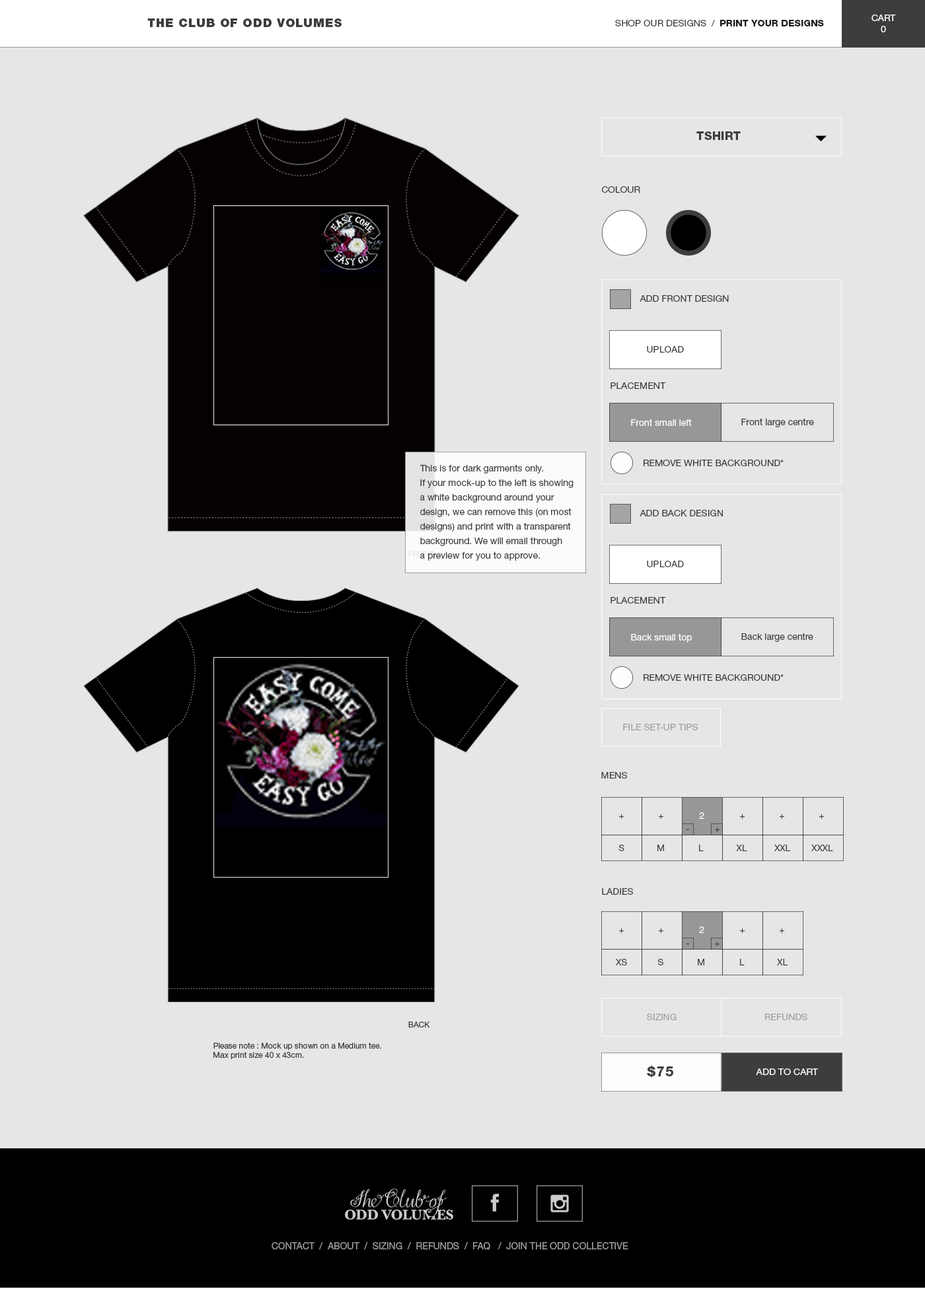
<style>
.page{position:relative;width:925px;height:1289px;background:#e6e6e6}
.page>*{position:absolute;margin:0}
.t1{font:9.2px "HelveticaNeueLTStd-Roman";color:#ffffff}
.t2{font:11.9px "HelveticaNeueLTStd-Blk";letter-spacing:0.05em;color:#3d3d3d}
.t3{font:9.2px "HelveticaNeueLTStd-Roman";color:#3d3d3d}
.t4{font:9.2px "HelveticaNeueLTStd-Hv";color:#1b1b1b}
.t5{font:11.9px "HelveticaNeueLTStd-Hv";color:#3d3d3d}
.t6{font:9.2px "HelveticaNeueLTStd-Roman";color:#3e3e3e}
.t7{font:9.2px "HelveticaNeueLTStd-Roman";color:#fffcfc}
.t8{font:9.2px/14.5px "HelveticaNeueLTStd-Roman";color:#3e3e3e}
.t9{font:9.2px "HelveticaNeueLTStd-Roman";color:#a0a0a0}
.t10{font:9.1px "HelveticaNeueLTStd-Roman";color:#3e3e3e}
.t11{font:9.1px "HelveticaNeueLTStd-Roman";color:#ffffff}
.t12{font:9.1px "HelveticaNeueLTStd-Roman";color:#3d3d3d}
.t13{font:7.9px "HelveticaNeueLTStd-Roman";color:#3e3e3e}
.t14{font:13.2px "HelveticaNeueLTStd-Hv";letter-spacing:0.05em;color:#3d3d3d}
.t15{font:9.2px "HelveticaNeueLTStd-Roman";color:#faf9f9}
.t16{font:9.5px "HelveticaNeueLTStd-Roman";color:#9b9b9b}
</style>
<div class="page">
<p class="t1" style="left:871px;top:15px;width:25px;height:17px;text-align:center">CART<br>0</p>
<p class="t2" style="left:147px;top:18px;width:195px;height:9px">THE CLUB OF ODD VOLUMES</p>
<p class="t3" style="left:615px;top:20px;width:209px;height:6px">SHOP OUR DESIGNS  /  <span class="t4">PRINT YOUR DESIGNS</span></p>
<p class="t5" style="left:696px;top:131px;width:44px;height:9px">TSHIRT</p>
<p class="t6" style="left:602px;top:186px;width:38px;height:7px">COLOUR</p>
<p class="t6" style="left:639px;top:295px;width:90px;height:7px">ADD FRONT DESIGN</p>
<p class="t6" style="left:647px;top:346px;width:37px;height:7px">UPLOAD</p>
<p class="t6" style="left:610px;top:382px;width:56px;height:7px">PLACEMENT</p>
<p class="t7" style="left:631px;top:419px;width:61px;height:7px">Front small left</p>
<p class="t6" style="left:741px;top:418px;width:73px;height:9px">Front large centre</p>
<p class="t6" style="left:643px;top:460px;width:140px;height:6px">REMOVE WHITE BACKGROUND*</p>
<p class="t8" style="left:419px;top:464px;width:154px;height:97px">This is for dark garments only.<br>If your mock-up to the left is showing <br>a white background around your <br>design, we can remove this (on most <br>designs) and print with a transparent <br>background. We will email through <br>a preview for you to approve.</p>
<p class="t6" style="left:639px;top:510px;width:84px;height:7px">ADD BACK DESIGN</p>
<p class="t6" style="left:647px;top:561px;width:37px;height:6px">UPLOAD</p>
<p class="t6" style="left:610px;top:597px;width:56px;height:7px">PLACEMENT</p>
<p class="t7" style="left:631px;top:633px;width:61px;height:10px">Back small top</p>
<p class="t6" style="left:741px;top:633px;width:72px;height:9px">Back large centre</p>
<p class="t6" style="left:643px;top:674px;width:140px;height:7px">REMOVE WHITE BACKGROUND*</p>
<p class="t9" style="left:623px;top:724px;width:75px;height:7px">FILE SET-UP TIPS</p>
<p class="t6" style="left:601px;top:772px;width:26px;height:7px">MENS</p>
<p class="t10" style="left:619px;top:814px;width:5px;height:5px">+</p>
<p class="t10" style="left:658px;top:814px;width:5px;height:5px">+</p>
<p class="t11" style="left:699px;top:812px;width:5px;height:7px">2</p>
<p class="t10" style="left:740px;top:814px;width:5px;height:5px">+</p>
<p class="t10" style="left:779px;top:814px;width:5px;height:5px">+</p>
<p class="t10" style="left:818px;top:814px;width:6px;height:5px">+</p>
<p class="t10" style="left:686px;top:829px;width:3px;height:1px">-</p>
<p class="t10" style="left:715px;top:828px;width:5px;height:4px">+</p>
<p class="t10" style="left:618px;top:845px;width:6px;height:6px">S</p>
<p class="t10" style="left:657px;top:845px;width:7px;height:6px">M</p>
<p class="t12" style="left:699px;top:845px;width:4px;height:6px">L</p>
<p class="t10" style="left:736px;top:845px;width:11px;height:6px">XL</p>
<p class="t10" style="left:774px;top:845px;width:17px;height:6px">XXL</p>
<p class="t10" style="left:811px;top:845px;width:22px;height:6px">XXXL</p>
<p class="t6" style="left:602px;top:888px;width:31px;height:7px">LADIES</p>
<p class="t10" style="left:619px;top:929px;width:5px;height:4px">+</p>
<p class="t10" style="left:658px;top:929px;width:5px;height:4px">+</p>
<p class="t11" style="left:699px;top:927px;width:5px;height:6px">2</p>
<p class="t10" style="left:740px;top:929px;width:5px;height:4px">+</p>
<p class="t10" style="left:779px;top:929px;width:5px;height:4px">+</p>
<p class="t10" style="left:715px;top:942px;width:5px;height:5px">+</p>
<p class="t10" style="left:686px;top:943px;width:3px;height:2px">-</p>
<p class="t10" style="left:616px;top:959px;width:11px;height:7px">XS</p>
<p class="t10" style="left:658px;top:959px;width:5px;height:7px">S</p>
<p class="t12" style="left:698px;top:959px;width:6px;height:7px">M</p>
<p class="t10" style="left:740px;top:959px;width:4px;height:7px">L</p>
<p class="t10" style="left:777px;top:959px;width:11px;height:7px">XL</p>
<p class="t9" style="left:647px;top:1014px;width:29px;height:7px">SIZING</p>
<p class="t9" style="left:765px;top:1014px;width:42px;height:7px">REFUNDS</p>
<p class="t13" style="left:408px;top:1022px;width:22px;height:6px">BACK</p>
<p class="t13" style="left:213px;top:1043px;width:168px;height:17px">Please note : Mock up shown on a Medium tee. <br>Max print size 40 x 43cm.</p>
<p class="t14" style="left:647px;top:1065px;width:26px;height:13px">$75</p>
<p class="t15" style="left:756px;top:1069px;width:62px;height:6px">ADD TO CART</p>
<p class="t16" style="left:271px;top:1243px;width:357px;height:7px">CONTACT  /  ABOUT  /  SIZING  /  REFUNDS  /  FAQ   /  JOIN THE ODD COLLECTIVE</p>
</div>
